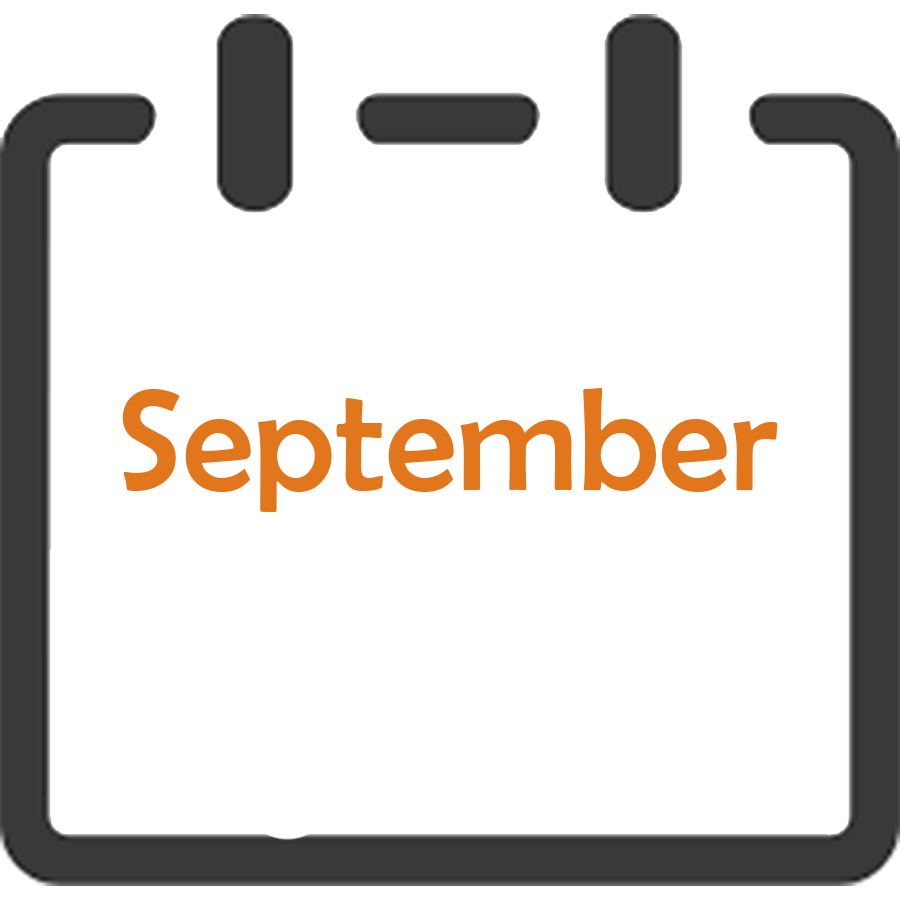
<style>
.page{position:relative;width:900px;height:900px;background:#ffffff}
.page>*{position:absolute;margin:0}
.t1{font:145.8px "BerlinSansFB-Reg";color:#e1761c}
</style>
<div class="page">
<p class="t1" style="left:122px;top:388px;width:656px;height:124px">September</p>
</div>
